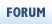
<style>
.page{position:relative;width:52px;height:24px}
.page>*{position:absolute;margin:0}
.t1{font:14px "Humanist521BT-BoldCondensed";color:#2d5078}
</style>
<div class="page">
<p class="t1" style="left:7px;top:7px;width:38px;height:10px">FORUM</p>
</div>
